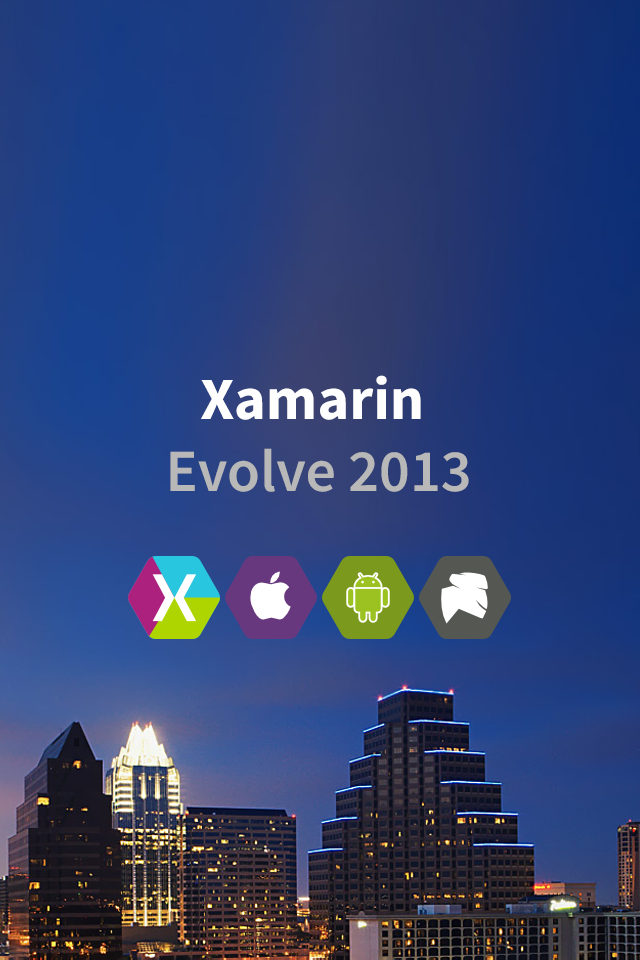
<style>
.page{position:relative;width:640px;height:960px}
.page>*{position:absolute;margin:0}
.t1{font:60px "SourceSansPro-Semibold";color:#b8b8b8}
.t2{font:60px "SourceSansPro-Bold";color:#fefefe}
</style>
<div class="page">
<p class="t1" style="left:170px;top:375px;width:299px;height:117px;text-align:center"><span class="t2">Xamarin <br></span>Evolve 2013</p>
</div>
